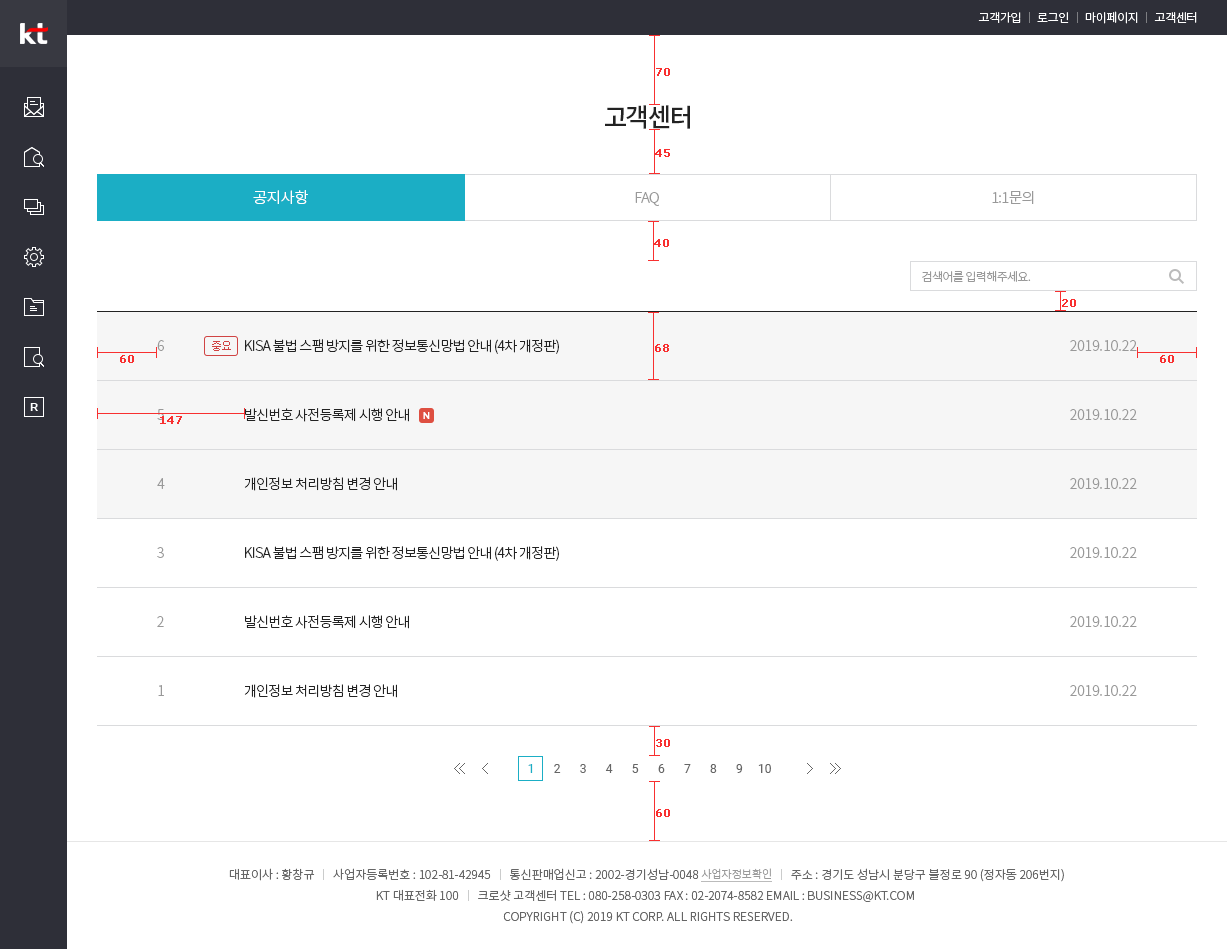
<style>
.page{position:relative;width:1227px;height:949px;background:#ffffff}
.page>*{position:absolute;margin:0}
.t1{font:11px "Verdana";color:#f83030;font-weight:bold}
.t2{font:26px "NotoSansCJKkr-Medium";letter-spacing:-0.075em;color:#222222;text-transform:uppercase}
.t3{font:15px "NotoSansCJKkr-Light";color:#ffffff}
.t4{font:15px "NotoSansCJKkr-Light";letter-spacing:-0.05em;color:#999999}
.t5{font:12px "NotoSansCJKkr-Light";letter-spacing:-0.05em;color:#999999}
.t6{font:14px/69px "NotoSansCJKkr-Light";color:#999999}
.t7{font:11px "Dotum";letter-spacing:-0.08em;color:#d04444}
.t8{font:14px/69px "NotoSansCJKkr-Light";letter-spacing:-0.05em;color:#222222}
.t9{font:9px "Lato-Bold";letter-spacing:-0.05em;color:#ffffff}
.t10{font:12px "Roboto-Regular";color:#1baec5}
.t11{font:12px "Roboto-Regular";color:#666666}
</style>
<div class="page">
<p class="t1" style="left:656px;top:68px;width:14px;height:8px">70</p>
<p class="t2" style="left:605px;top:105px;width:85px;height:24px">고객센터</p>
<p class="t1" style="left:655px;top:149px;width:15px;height:8px">45</p>
<p class="t3" style="left:253px;top:190px;width:55px;height:14px">공지사항</p>
<p class="t4" style="left:635px;top:192px;width:24px;height:14px">FAQ</p>
<p class="t4" style="left:992px;top:191px;width:42px;height:13px">1:1문의</p>
<p class="t1" style="left:654px;top:239px;width:15px;height:8px">40</p>
<p class="t5" style="left:922px;top:271px;width:109px;height:12px">검색어를 입력해주세요.</p>
<p class="t1" style="left:1062px;top:299px;width:14px;height:8px">20</p>
<p class="t6" style="left:157px;top:340px;width:8px;height:356px">6<br>5<br>4<br>3<br>2<br>1</p>
<p class="t7" style="left:212px;top:341px;width:19px;height:10px">중요</p>
<p class="t8" style="left:244px;top:339px;width:315px;height:359px">KISA 불법 스팸 방지를 위한 정보통신망법 안내 (4차 개정판)<br>발신번호 사전등록제 시행 안내<br>개인정보 처리방침 변경 안내<br>KISA 불법 스팸 방지를 위한 정보통신망법 안내 (4차 개정판)<br>발신번호 사전등록제 시행 안내<br>개인정보 처리방침 변경 안내</p>
<p class="t6" style="left:1070px;top:340px;width:67px;height:356px;text-align:right">2019.10.22<br>2019.10.22<br>2019.10.22<br>2019.10.22<br>2019.10.22<br>2019.10.22</p>
<p class="t1" style="left:655px;top:344px;width:14px;height:8px">68</p>
<p class="t1" style="left:120px;top:355px;width:14px;height:8px">60</p>
<p class="t1" style="left:1160px;top:355px;width:14px;height:8px">60</p>
<p class="t9" style="left:423px;top:412px;width:7px;height:7px">N</p>
<p class="t1" style="left:160px;top:416px;width:22px;height:8px">147</p>
<p class="t1" style="left:656px;top:739px;width:14px;height:8px">30</p>
<p class="t10" style="left:528px;top:764px;width:5px;height:9px">1</p>
<p class="t11" style="left:554px;top:764px;width:7px;height:9px">2</p>
<p class="t11" style="left:580px;top:764px;width:6px;height:9px">3</p>
<p class="t11" style="left:605px;top:764px;width:8px;height:9px">4</p>
<p class="t11" style="left:632px;top:764px;width:7px;height:9px">5</p>
<p class="t11" style="left:658px;top:764px;width:7px;height:9px">6</p>
<p class="t11" style="left:684px;top:764px;width:7px;height:9px">7</p>
<p class="t11" style="left:710px;top:764px;width:7px;height:9px">8</p>
<p class="t11" style="left:736px;top:764px;width:7px;height:9px">9</p>
<p class="t11" style="left:758px;top:764px;width:13px;height:9px">10</p>
<p class="t1" style="left:656px;top:809px;width:14px;height:8px">60</p>
</div>
